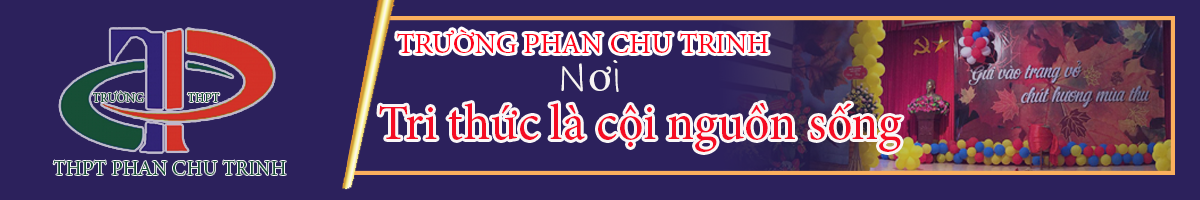
<style>
.page{position:relative;width:1200px;height:200px;background:#2c215c}
.page>*{position:absolute;margin:0}
.t1{font:29.2px "MinionPro-Regular";color:#ff051d}
.t2{font:45.8px "InkFree";color:#f7f3f3}
.t3{font:45.8px "MinionPro-Regular";color:#f7f3f3}
.t4{font:12.5px "MinionPro-Regular";color:#174f36}
.t5{font:50px "MinionPro-Regular";color:#f50c23}
.t6{font:20.8px "MinionPro-Regular";color:#174f36}
</style>
<div class="page">
<p class="t1" style="left:397px;top:29px;width:371px;height:24px">TRƯỜNG PHAN CHU TRINH</p>
<p class="t2" style="left:561px;top:60px;width:58px;height:32px">N<span class="t3">ơ</span>i</p>
<p class="t4" style="left:92px;top:91px;width:52px;height:11px">TRƯỜNG</p>
<p class="t4" style="left:187px;top:92px;width:33px;height:10px">THPT</p>
<p class="t5" style="left:379px;top:103px;width:523px;height:49px">Tri thức là cội nguồn sống</p>
<p class="t6" style="left:53px;top:160px;width:233px;height:15px">THPT PHAN CHU TRINH</p>
</div>
